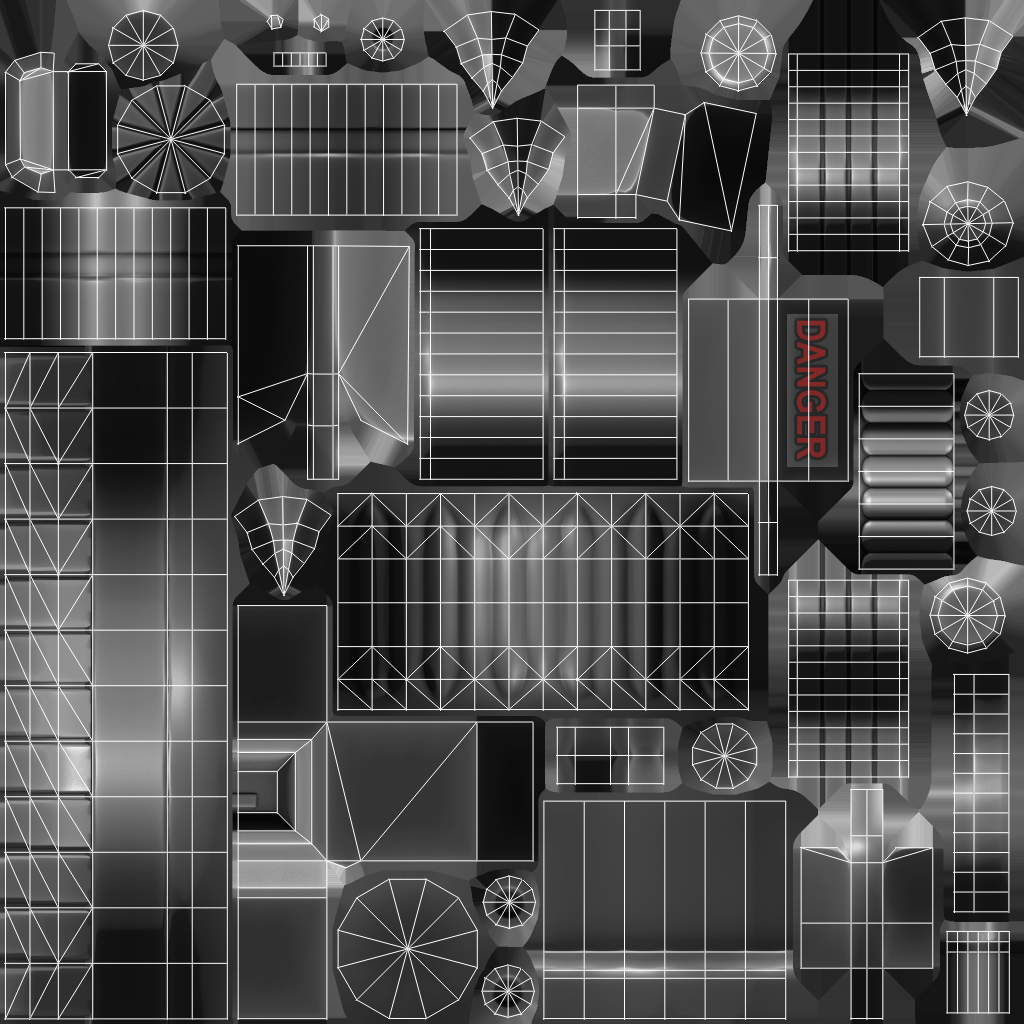
<style>
.page{position:relative;width:1024px;height:1024px}
.page>*{position:absolute;margin:0}
.t1{font:38.9px "Arial-BoldMT";color:#802727;scale:0.84 1}
</style>
<div class="page">
<p class="t1" style="left:796px;top:320px;width:30px;height:140px;rotate:90deg">DANGER</p>
</div>
